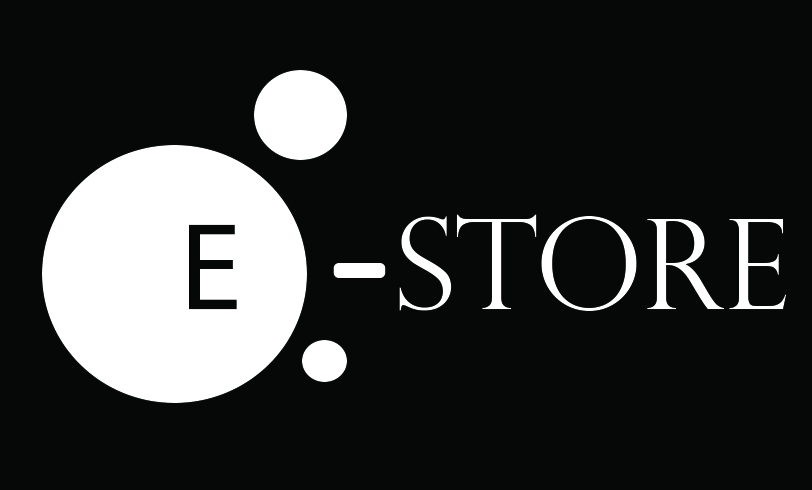
<style>
.page{position:relative;width:812px;height:490px;background:#060808}
.page>*{position:absolute;margin:0}
.t1{font:125px "PerpetuaTitlingMT-Light";color:#ffffff}
.t2{font:125px "MyriadPro-Regular";color:#060808}
.t3{font:125px "OCRAExtended";color:#ffffff}
</style>
<div class="page">
<p class="t1" style="left:189px;top:214px;width:598px;height:97px"><span class="t2">E   </span><span class="t3">-</span>store</p>
</div>
